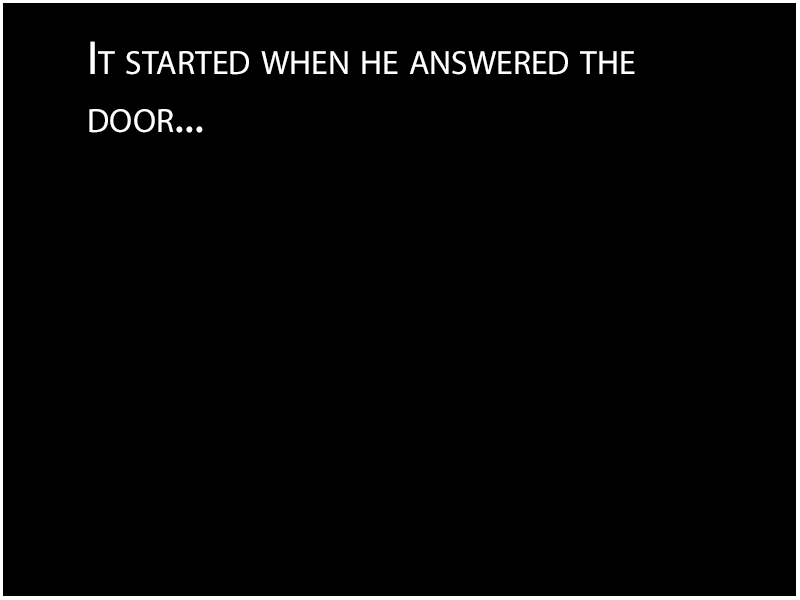
<style>
.page{position:relative;width:800px;height:600px;background:#000000}
.page>*{position:absolute;margin:0}
.t1{font:48px "MyriadPro-Regular";color:#ffffff;font-variant:small-caps}
</style>
<div class="page">
<p class="t1" style="left:89px;top:41px;width:546px;height:92px">It started when he answered the<br>door...</p>
</div>
